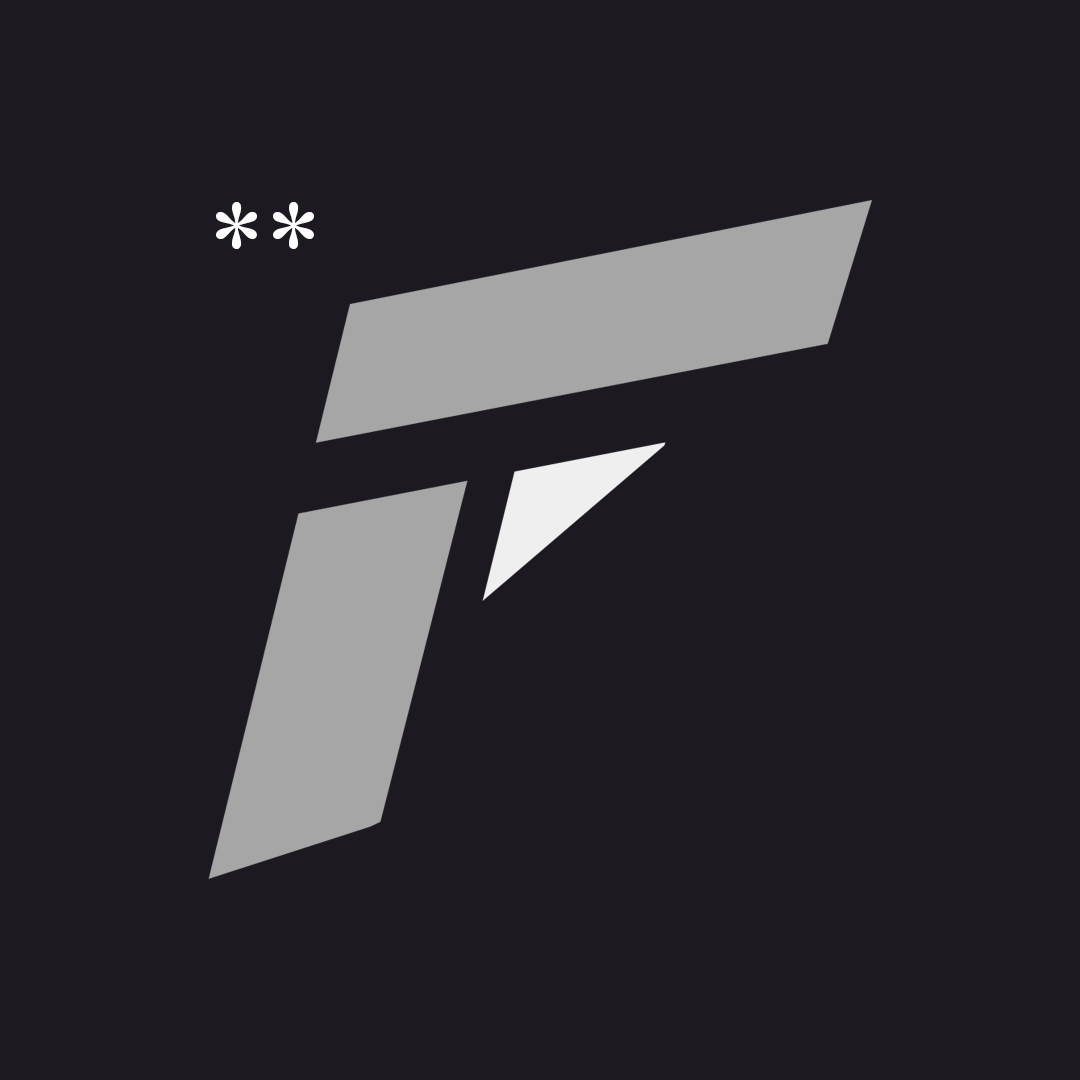
<style>
.page{position:relative;width:1080px;height:1080px;background:#1c1920}
.page>*{position:absolute;margin:0}
.t1{font:114.2px "TimesNewRomanPSMT";color:#ffffff}
</style>
<div class="page">
<p class="t1" style="left:216px;top:202px;width:98px;height:47px">**</p>
</div>
